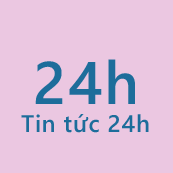
<style>
.page{position:relative;width:173px;height:173px;background:#ebc7e1}
.page>*{position:absolute;margin:0}
.t1{font:60px "SegoeWP-Semibold";letter-spacing:0.025em;color:#1d6d9b}
.t2{font:24px "SegoeWP-Semibold";letter-spacing:0.025em;color:#1d6d9b}
</style>
<div class="page">
<p class="t1" style="left:35px;top:59px;width:100px;height:45px">24h</p>
<p class="t2" style="left:21px;top:114px;width:128px;height:19px">Tin tức 24h</p>
</div>
